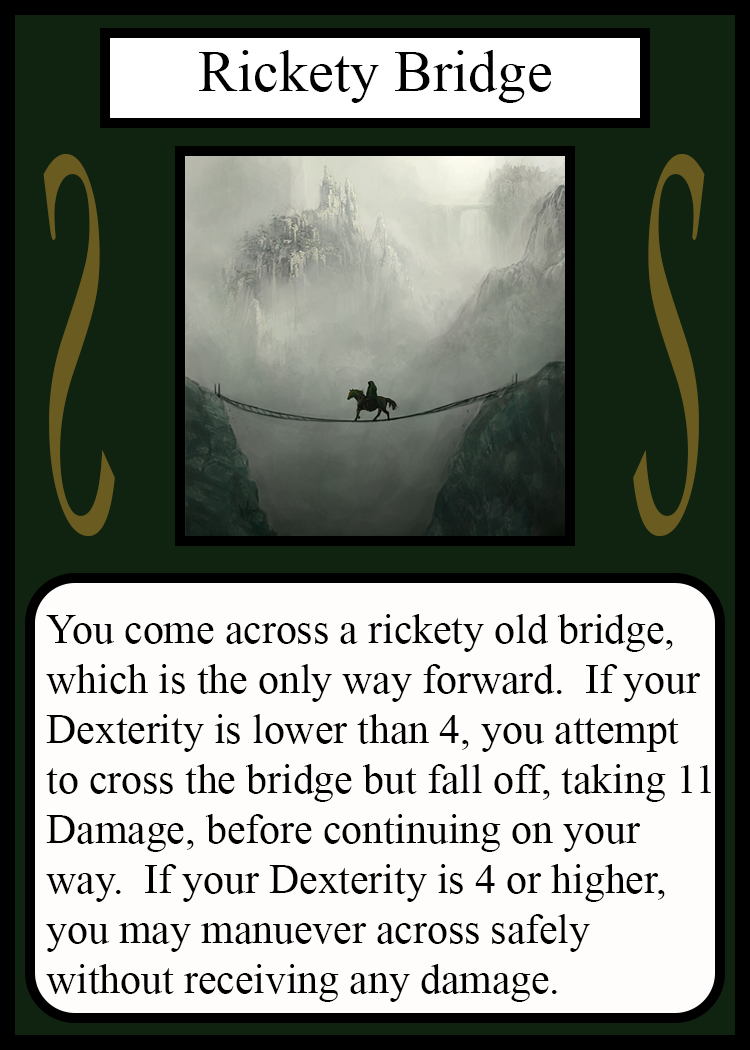
<style>
.page{position:relative;width:750px;height:1050px;background:#fffcfc}
.page>*{position:absolute;margin:0}
.t1{font:58.3px "TimesNewRomanPSMT";color:#010101}
.t2{font:548.5px "Apple-Chancery";color:#6a5c21;scale:0.27 1}
.t3{font:548.2px "Apple-Chancery";color:#6a5c21;scale:0.27 1}
.t4{font:41.7px "TimesNewRomanPSMT";color:#000000}
</style>
<div class="page">
<p class="t1" style="left:199px;top:50px;width:353px;height:53px">Rickety Bridge</p>
<p class="t2" style="left:43px;top:154px;width:72px;height:382px;rotate:180deg">S</p>
<p class="t3" style="left:633px;top:154px;width:72px;height:382px">S</p>
<p class="t4" style="left:46px;top:614px;width:665px;height:388px">You come across a rickety old bridge,<br>which is the only way forward.  If your<br>Dexterity is lower than 4, you attempt<br>to cross the bridge but fall off, taking 11<br>Damage, before continuing on your<br>way.  If your Dexterity is 4 or higher,<br>you may manuever across safely <br>without receiving any damage.</p>
</div>
